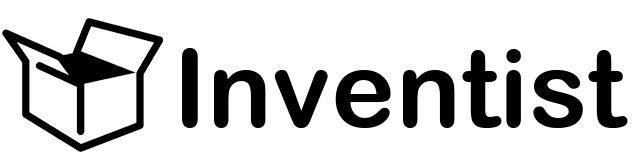
<style>
.page{position:relative;width:640px;height:160px;background:#ffffff}
.page>*{position:absolute;margin:0}
.t1{font:108.3px "ArialRoundedMTBold";color:#000000}
</style>
<div class="page">
<p class="t1" style="left:182px;top:48px;width:446px;height:80px">Inventist</p>
</div>
